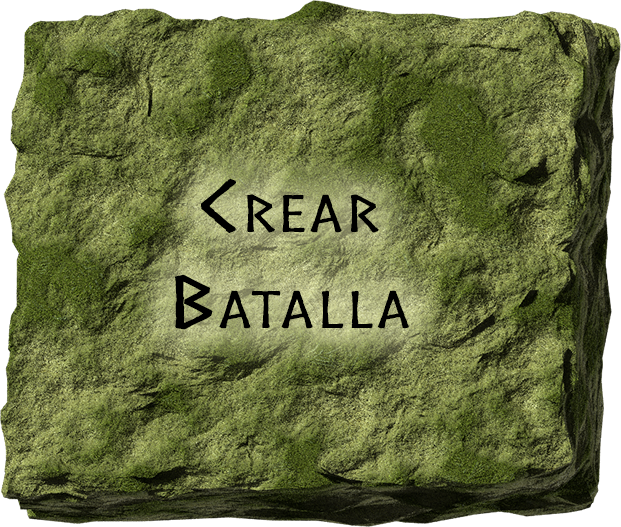
<style>
.page{position:relative;width:621px;height:527px}
.page>*{position:absolute;margin:0}
.t1{font:68px "Norse";color:#000000;font-variant:small-caps;font-weight:bold;scale:1.76 1}
</style>
<div class="page">
<p class="t1" style="left:175px;top:178px;width:234px;height:152px;text-align:center">Crear<br>Batalla</p>
</div>
